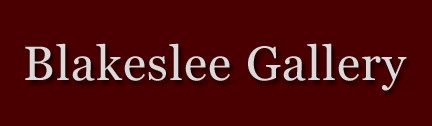
<style>
.page{position:relative;width:432px;height:126px;background:#4a0000}
.page>*{position:absolute;margin:0}
.t1{font:48px "Georgia";letter-spacing:0.025em;color:#dbdada}
</style>
<div class="page">
<p class="t1" style="left:25px;top:43px;width:382px;height:48px">Blakeslee Gallery</p>
</div>
